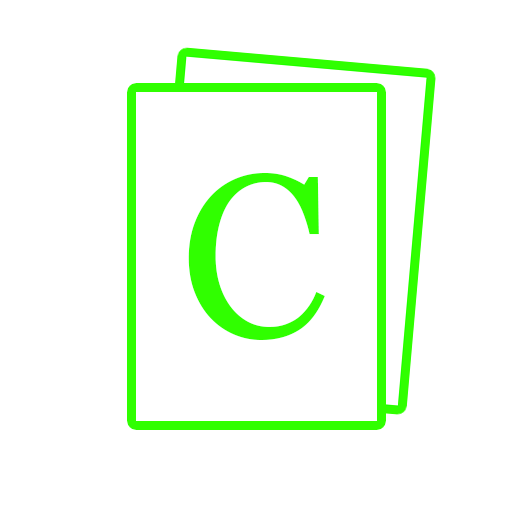
<style>
.page{position:relative;width:512px;height:512px;background:#ffffff}
.page>*{position:absolute;margin:0}
.t1{font:230px "Georgia";color:#30ff00}
</style>
<div class="page">
<p class="t1" style="left:188px;top:173px;width:137px;height:167px">C</p>
</div>
